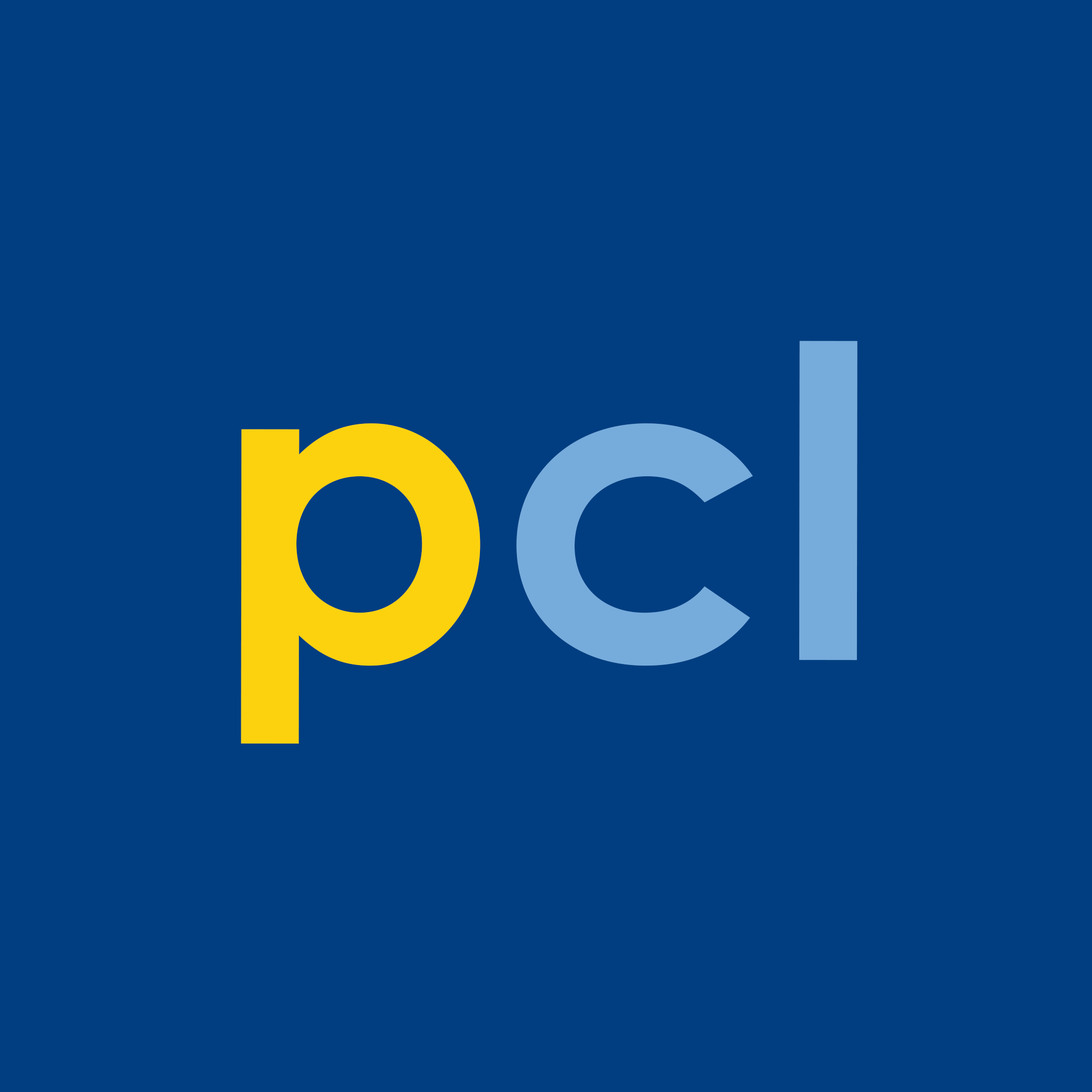
<style>
.page{position:relative;width:1092px;height:1092px;background:#003e81}
.page>*{position:absolute;margin:0}
.t1{font:433.3px "CenturyGothicPro-Bold";color:#76acdc}
.t2{font:433.3px "CenturyGothicPro-Bold";color:#fcd20f}
</style>
<div class="page">
<p class="t1" style="left:241px;top:341px;width:616px;height:403px"><span class="t2">p</span>cl</p>
</div>
